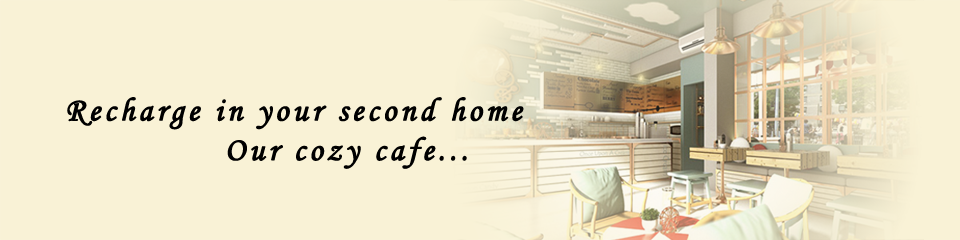
<style>
.page{position:relative;width:960px;height:240px;background:#f9f2d6}
.page>*{position:absolute;margin:0}
.t1{font:33px "MonotypeCorsiva";letter-spacing:0.1em;color:#000000;font-weight:bold}
</style>
<div class="page">
<p class="t1" style="left:67px;top:97px;width:457px;height:72px">Recharge in your second home<br>              Our cozy cafe...</p>
</div>
